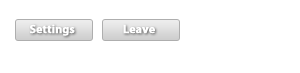
<style>
.page{position:relative;width:300px;height:73px;background:#ffffff}
.page>*{position:absolute;margin:0}
.t1{font:12px "MyriadPro-Bold";letter-spacing:-0.015em;color:#ffffff;font-weight:bold}
</style>
<div class="page">
<p class="t1" style="left:30px;top:24px;width:45px;height:12px">Settings</p>
<p class="t1" style="left:123px;top:24px;width:32px;height:10px">Leave</p>
</div>
